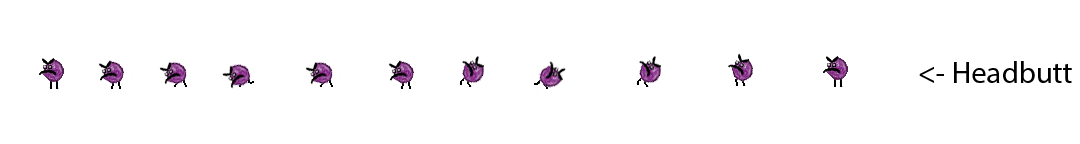
<style>
.page{position:relative;width:1080px;height:144px;background:#ffffff}
.page>*{position:absolute;margin:0}
.t1{font:12px "MyriadPro-Regular";color:#000000}
</style>
<div class="page">
<p class="t1" style="left:919px;top:61px;width:153px;height:22px">&lt;- Headbutt</p>
</div>
